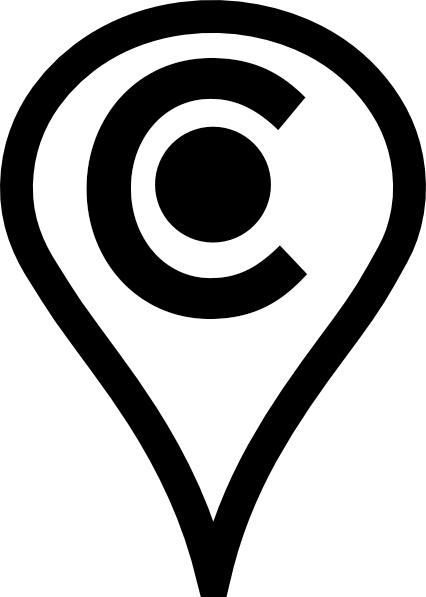
<style>
.page{position:relative;width:426px;height:597px;background:#ffffff}
.page>*{position:absolute;margin:0}
.t1{font:361.8px "Gotham-Medium";color:#000000;scale:0.95 1}
</style>
<div class="page">
<p class="t1" style="left:86px;top:57px;width:222px;height:263px">C</p>
</div>
